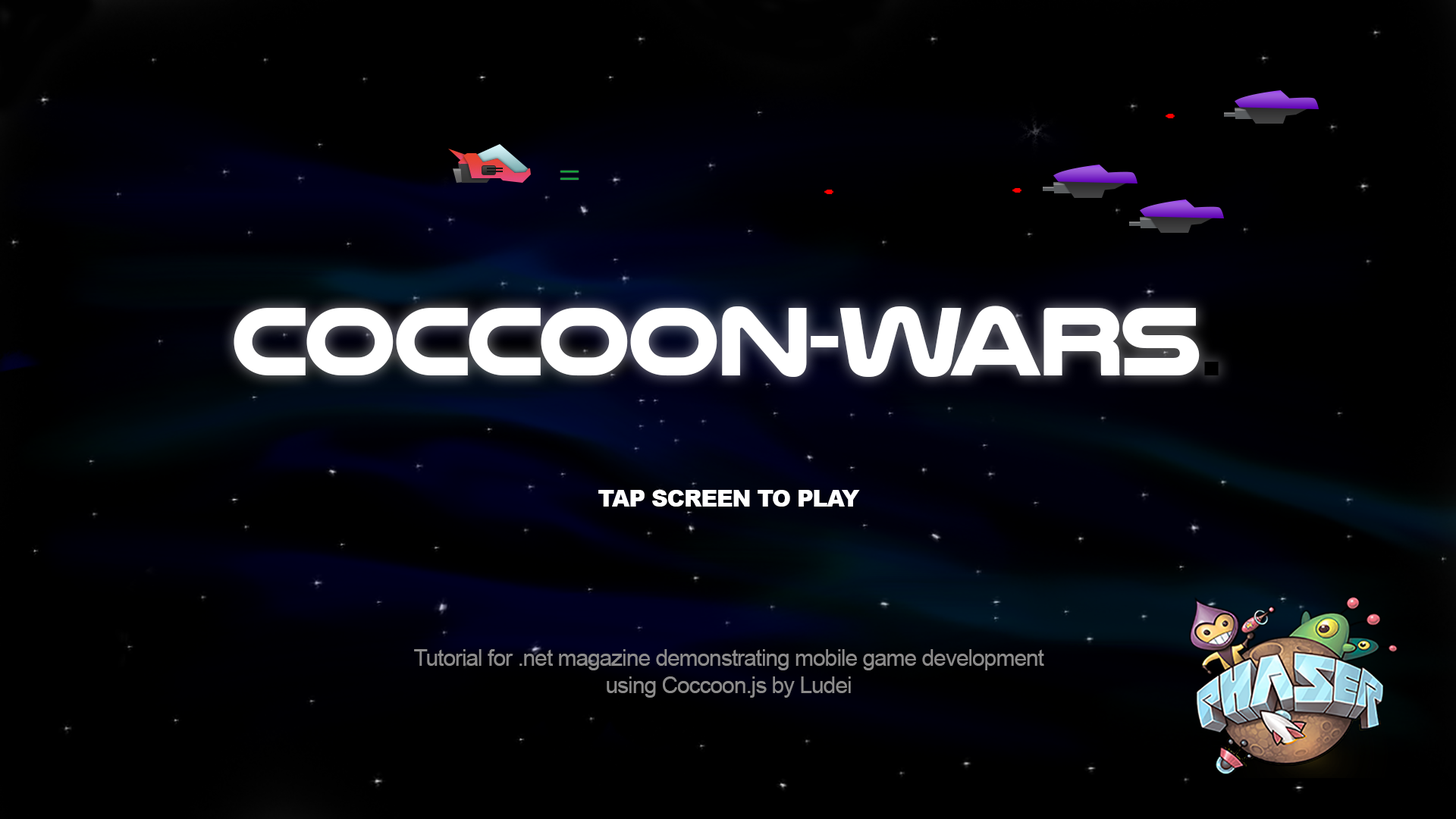
<style>
.page{position:relative;width:1456px;height:819px;background:#000000}
.page>*{position:absolute;margin:0}
.t1{font:100.1px "NulshockRg-Bold";letter-spacing:-0.035em;color:#ffffff}
.t2{font:100.1px "Arial-BoldMT";letter-spacing:-0.035em;color:#000000}
.t3{font:22.7px "Arial-Black";letter-spacing:-0.035em;color:#ffffff}
.t4{font:22.7px "ArialMT";letter-spacing:-0.035em;color:#8c8b8b}
</style>
<div class="page">
<p class="t1" style="left:234px;top:306px;width:985px;height:71px">Coccoon-Wars<span class="t2">.</span></p>
<p class="t3" style="left:598px;top:490px;width:262px;height:17px">TAP SCREEN TO PLAY</p>
<p class="t4" style="left:414px;top:649px;width:630px;height:49px;text-align:center">Tutorial for .net magazine demonstrating mobile game development<br>using Coccoon.js by Ludei</p>
</div>
